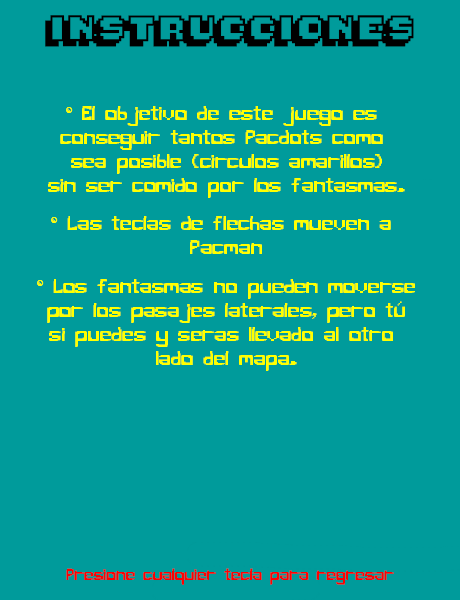
<style>
.page{position:relative;width:460px;height:600px;background:#009b9b}
.page>*{position:absolute;margin:0}
.t1{font:20px "Pixelmania";color:#000000}
.t2{font:20px "PixelBug";color:#ffff00}
.t3{font:32px "PacFont";color:#ffff00}
.t4{font:16px "PixelBug";color:#ff0000}
</style>
<div class="page">
<p class="t1" style="left:45px;top:15px;width:369px;height:32px">INSTRUCCIONES</p>
<p class="t2" style="left:37px;top:106px;width:378px;height:265px;text-align:center"><span class="t3">2 </span>El objetivo de este juego es <br>conseguir tantos Pacdots como <br>sea posible (circulos amarillos)<br>sin ser comido por los fantasmas.<br><span class="t3">2 </span>Las teclas de flechas mueven a <br>Pacman<br><span class="t3">2 </span>Los fantasmas no pueden moverse<br>por los pasajes laterales, pero tú<br>si puedes y seras llevado al otro <br>lado del mapa.</p>
<p class="t4" style="left:66px;top:568px;width:328px;height:17px">Presione cualquier tecla para regresar</p>
</div>
